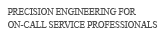
<style>
.page{position:relative;width:166px;height:38px;background:#ffffff}
.page>*{position:absolute;margin:0}
.t1{font:8.9px/13.9px "TimesNewRomanPSMT";color:#4f4f4f;text-transform:uppercase}
</style>
<div class="page">
<p class="t1" style="left:7px;top:8px;width:151px;height:20px">Precision Engineering for<br>On-Call Service Professionals</p>
</div>
